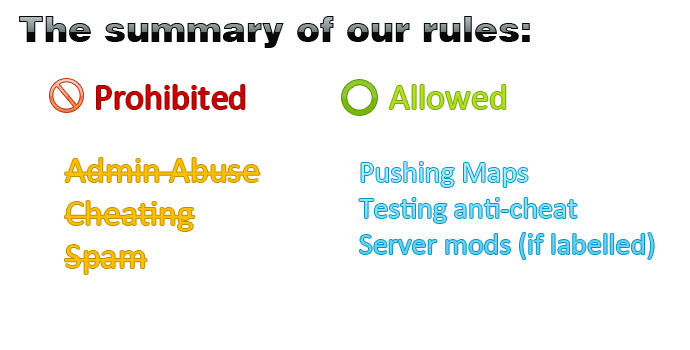
<style>
.page{position:relative;width:690px;height:350px;background:#ffffff}
.page>*{position:absolute;margin:0}
.t1{font:36px "HelveticaLT-Black"}
.t2{font:36px "Calibri";color:#cc0000}
.t3{font:36px "Calibri";color:#afde27}
.t4{font:36px "Calibri";color:#febf01}
.t5{font:30px "Calibri"}
</style>
<div class="page">
<p class="t1" style="left:19px;top:16px;width:511px;height:32px">The summary of our rules:</p>
<p class="t2" style="left:97px;top:85px;width:148px;height:24px">Prohibited</p>
<p class="t3" style="left:389px;top:85px;width:117px;height:24px">Allowed</p>
<p class="t4" style="left:65px;top:158px;width:195px;height:116px">Admin Abuse<br>Cheating<br>Spam</p>
<p class="t5" style="left:359px;top:162px;width:295px;height:97px">Pushing Maps<br>Testing anti-cheat<br>Server mods (if labelled)</p>
</div>
